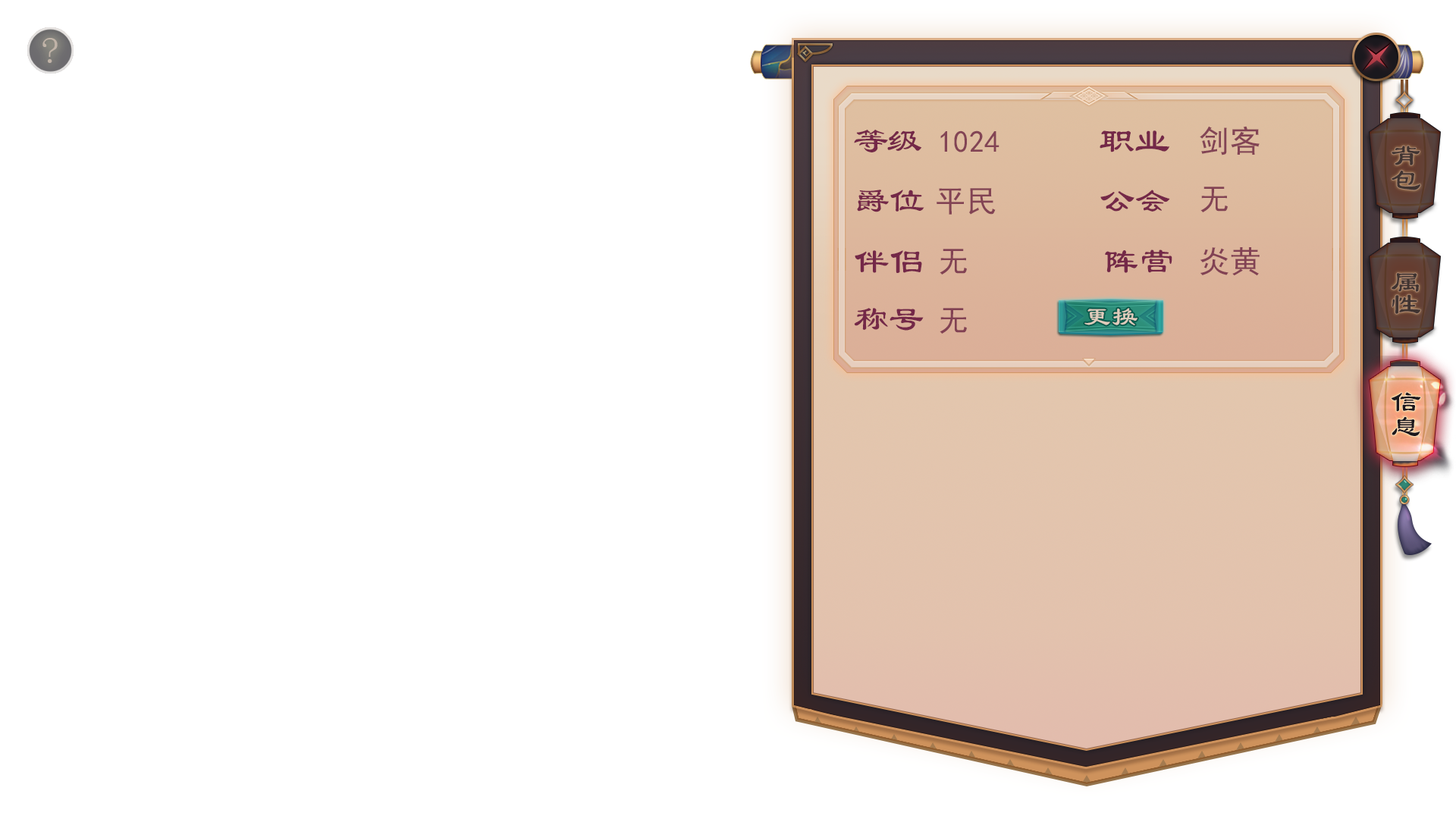
<style>
.page{position:relative;width:1456px;height:819px;background:#ffffff}
.page>*{position:absolute;margin:0}
.t1{font:30.6px "SimHei";color:#834455}
.t2{font:35.6px "LiSu";color:#742848}
.t3{font:30.6px "LiSu";color:#403431}
.t4{font:30.6px "SimHei";color:#824354}
.t5{font:30.6px "SimHei";color:#834354}
.t6{font:30.6px "SimHei";color:#824254}
.t7{font:30.6px "SimHei";color:#732947}
.t8{font:26.5px "LiSu";color:#dfccbc}
.t9{font:30.6px "LiSu";color:#1d191d}
</style>
<div class="page">
<p class="t1" style="left:1200px;top:126px;width:60px;height:29px">剑客</p>
<p class="t2" style="left:854px;top:130px;width:68px;height:22px">等级</p>
<p class="t1" style="left:940px;top:130px;width:59px;height:22px">1024</p>
<p class="t2" style="left:1100px;top:130px;width:70px;height:22px">职业</p>
<p class="t3" style="left:1392px;top:146px;width:28px;height:44px">背包</p>
<p class="t2" style="left:857px;top:190px;width:67px;height:22px">爵位</p>
<p class="t4" style="left:937px;top:188px;width:59px;height:27px">平民</p>
<p class="t2" style="left:1100px;top:190px;width:70px;height:22px">公会</p>
<p class="t5" style="left:1200px;top:187px;width:28px;height:25px">无</p>
<p class="t2" style="left:855px;top:250px;width:67px;height:23px">伴侣</p>
<p class="t6" style="left:940px;top:249px;width:27px;height:26px">无</p>
<p class="t2" style="left:1105px;top:249px;width:67px;height:24px">阵营</p>
<p class="t6" style="left:1200px;top:247px;width:60px;height:29px">炎黄</p>
<p class="t3" style="left:1392px;top:273px;width:29px;height:41px">属性</p>
<p class="t2" style="left:854px;top:308px;width:70px;height:23px">称号</p>
<p class="t7" style="left:940px;top:308px;width:27px;height:26px;opacity:0.88">无</p>
<p class="t8" style="left:1084px;top:308px;width:53px;height:17px">更换</p>
<p class="t9" style="left:1391px;top:392px;width:30px;height:44px">信息</p>
</div>
